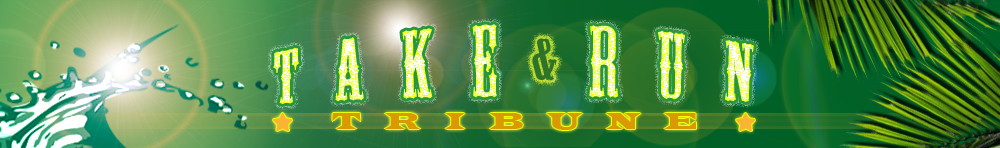
<style>
.page{position:relative;width:1000px;height:148px}
.page>*{position:absolute;margin:0}
.t1{font:67.2px "MesquiteStd";letter-spacing:0.4em;scale:1.47 1}
.t2{font:54.2px "MesquiteStd";letter-spacing:0.4em;color:#2d7329;scale:1.34 1}
.t3{font:24px "LatinWide";letter-spacing:1em;color:#d99900}
</style>
<div class="page">
<p class="t1" style="left:273px;top:24px;width:481px;height:80px">TakE Run</p>
<p class="t2" style="left:532px;top:38px;width:25px;height:43px;rotate:2deg">&amp;</p>
<p class="t3" style="left:332px;top:113px;width:364px;height:17px">TRIBUNE</p>
</div>
